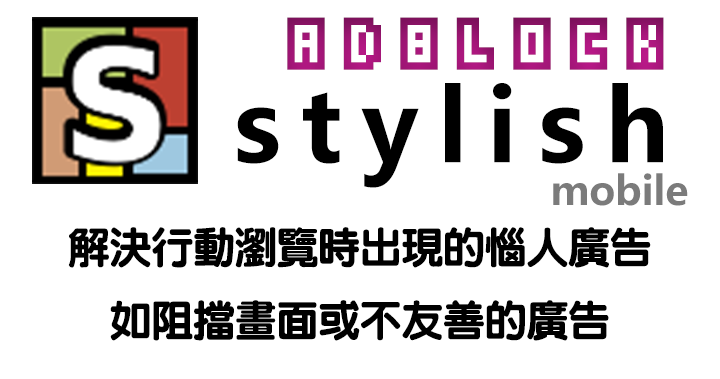
<style>
.page{position:relative;width:720px;height:379px;background:#ffffff}
.page>*{position:absolute;margin:0}
.t1{font:59.5px "GrixelAcme5CompCapsO";letter-spacing:0.2em;color:#a11576}
.t2{font:99.2px "MicrosoftYaHei-Bold";letter-spacing:0.2em;color:#000000}
.t3{font:39.7px "MicrosoftYaHei-Bold";color:#7b7b7b}
.t4{font:41.7px "YenRound-Ultra";color:#000000}
</style>
<div class="page">
<p class="t1" style="left:287px;top:17px;width:377px;height:53px">adblock</p>
<p class="t2" style="left:237px;top:83px;width:426px;height:105px">stylish</p>
<p class="t3" style="left:553px;top:173px;width:135px;height:33px">mobile</p>
<p class="t4" style="left:68px;top:227px;width:583px;height:114px;text-align:center">解決行動瀏覽時出現的惱人廣告<br>如阻擋畫面或不友善的廣告</p>
</div>
